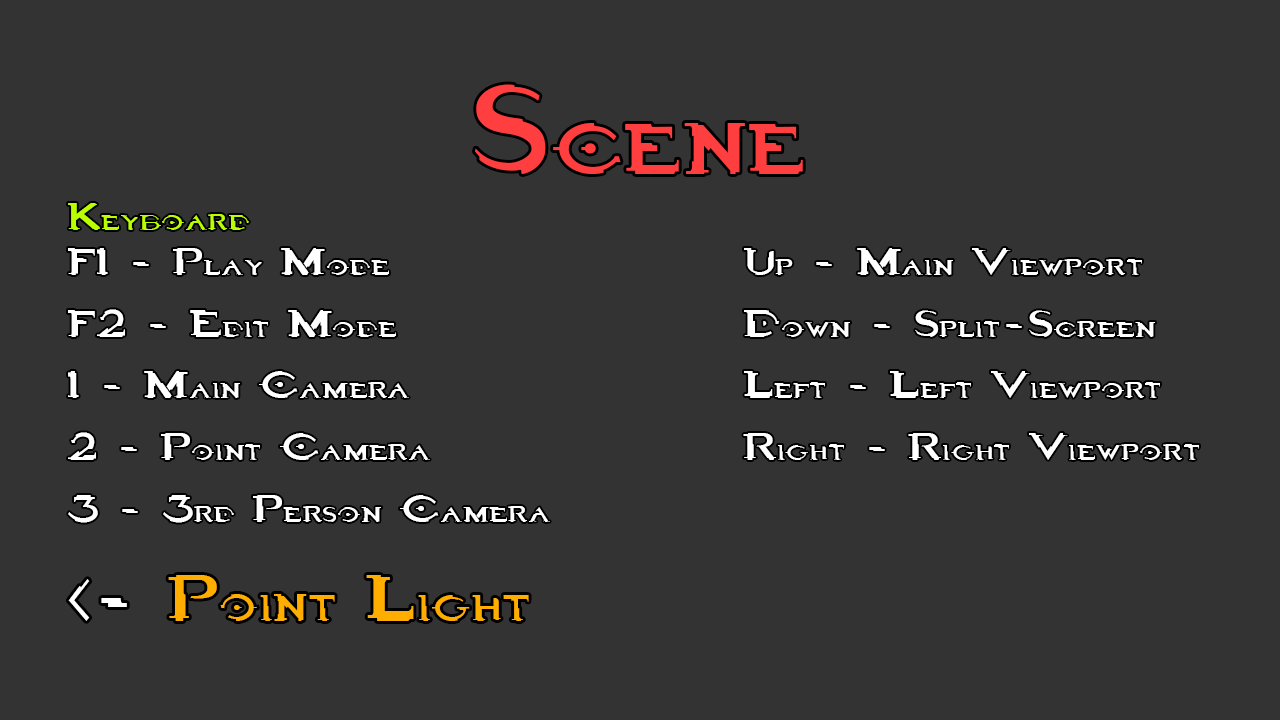
<style>
.page{position:relative;width:1280px;height:720px;background:#333333}
.page>*{position:absolute;margin:0}
.t1{font:169.3px "Halo3";color:#ff3f3f;scale:0.64 1}
.t2{font:51.4px "Halo3";color:#baff00;scale:0.68 1}
.t3{font:51.4px "Halo3";color:#ffffff;scale:0.68 1}
.t4{font:87.9px "Halo3";color:#ffae00;scale:0.67 1}
.t5{font:87.9px "Halo3";color:#ffffff;scale:0.67 1}
</style>
<div class="page">
<p class="t1" style="left:475px;top:84px;width:328px;height:90px">Scene</p>
<p class="t2" style="left:68px;top:203px;width:181px;height:27px">Keyboard</p>
<p class="t3" style="left:68px;top:248px;width:482px;height:275px">F1 - Play Mode<br>F2 - Edit Mode<br>1 - Main Camera<br>2 - Point Camera<br>3 - 3rd Person Camera</p>
<p class="t3" style="left:743px;top:248px;width:456px;height:212px">Up - Main Viewport<br>Down - Split-Screen<br>Left - Left Viewport<br>Right - Right Viewport</p>
<p class="t4" style="left:68px;top:575px;width:461px;height:46px"><span class="t5">&lt;- </span>Point Light</p>
</div>
